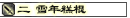
<style>
.page{position:relative;width:130px;height:18px;background:#ffffff}
.page>*{position:absolute;margin:0}
.t1{font:13.5px "LiSu";letter-spacing:-0.075em;color:#161616}
</style>
<div class="page">
<p class="t1" style="left:17px;top:4px;width:69px;height:10px">二 雪年糕棍</p>
</div>
